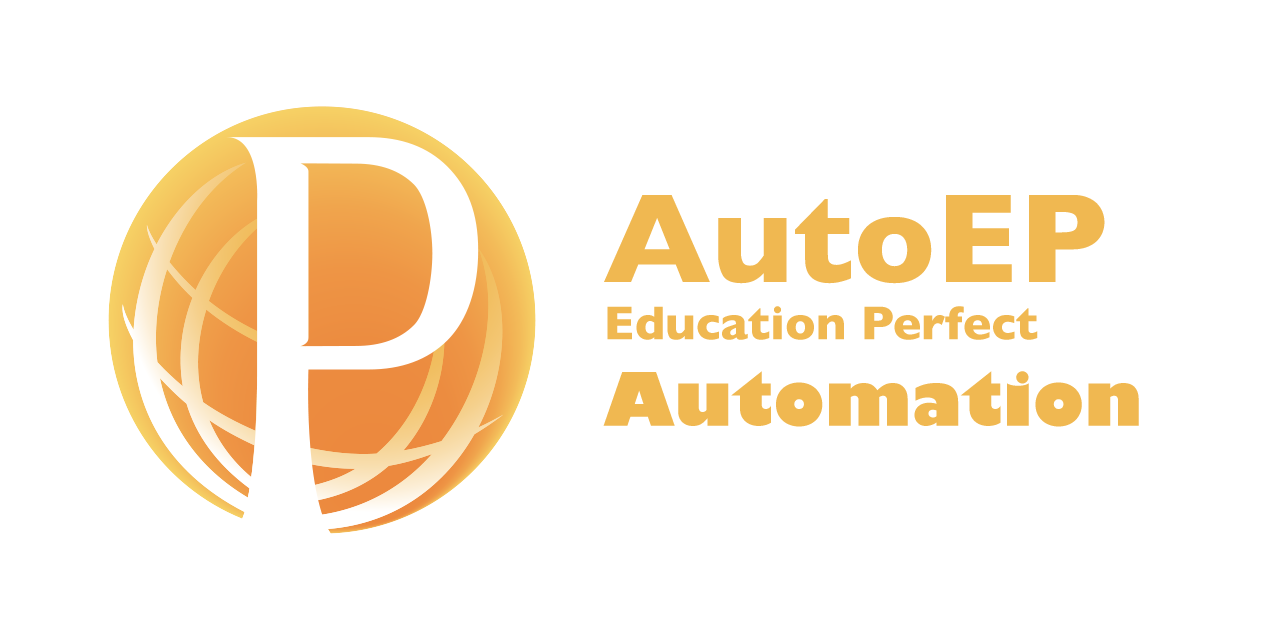
<style>
.page{position:relative;width:1280px;height:640px;background:#ffffff}
.page>*{position:absolute;margin:0}
.t1{font:48px "GillSans-Bold";color:#f0b851}
.t2{font:128px "GillSans-Bold";color:#f0b851}
.t3{font:72px "GillSans-UltraBold";color:#f0b851}
</style>
<div class="page">
<p class="t1" style="left:603px;top:195px;width:536px;height:232px"><span class="t2">AutoEP<br></span>Education Perfect <span class="t3">Automation</span></p>
</div>
